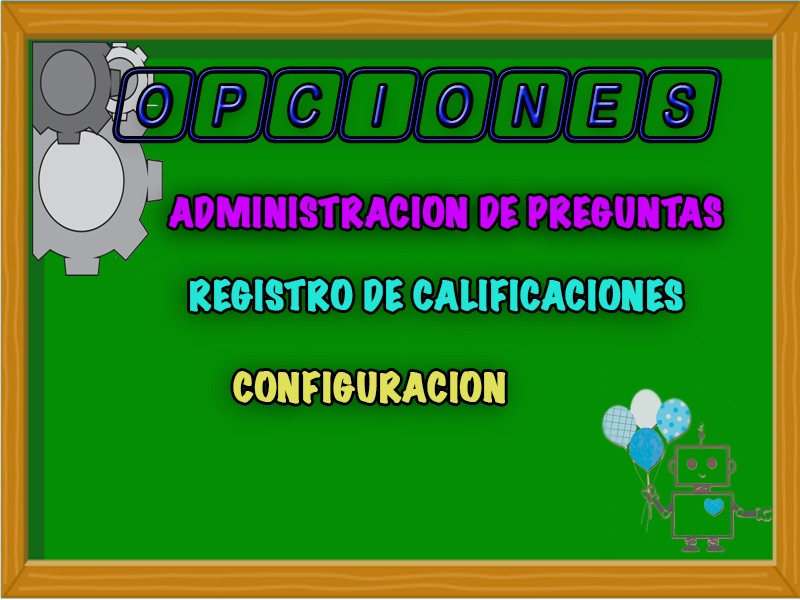
<style>
.page{position:relative;width:800px;height:600px;background:#048e04}
.page>*{position:absolute;margin:0}
.t1{font:36px "MarkerFelt-Wide";color:#cc00ff;font-weight:bold}
.t2{font:36px "MarkerFelt-Wide";color:#20e6d6;font-weight:bold}
.t3{font:36px "MarkerFelt-Wide";color:#dfe159;font-weight:bold}
</style>
<div class="page">
<p class="t1" style="left:169px;top:196px;width:553px;height:33px">ADMINISTRACION DE PREGUNTAS</p>
<p class="t2" style="left:190px;top:279px;width:493px;height:33px">REGISTRO DE CALIFICACIONES</p>
<p class="t3" style="left:233px;top:371px;width:273px;height:33px">CONFIGURACION</p>
</div>
